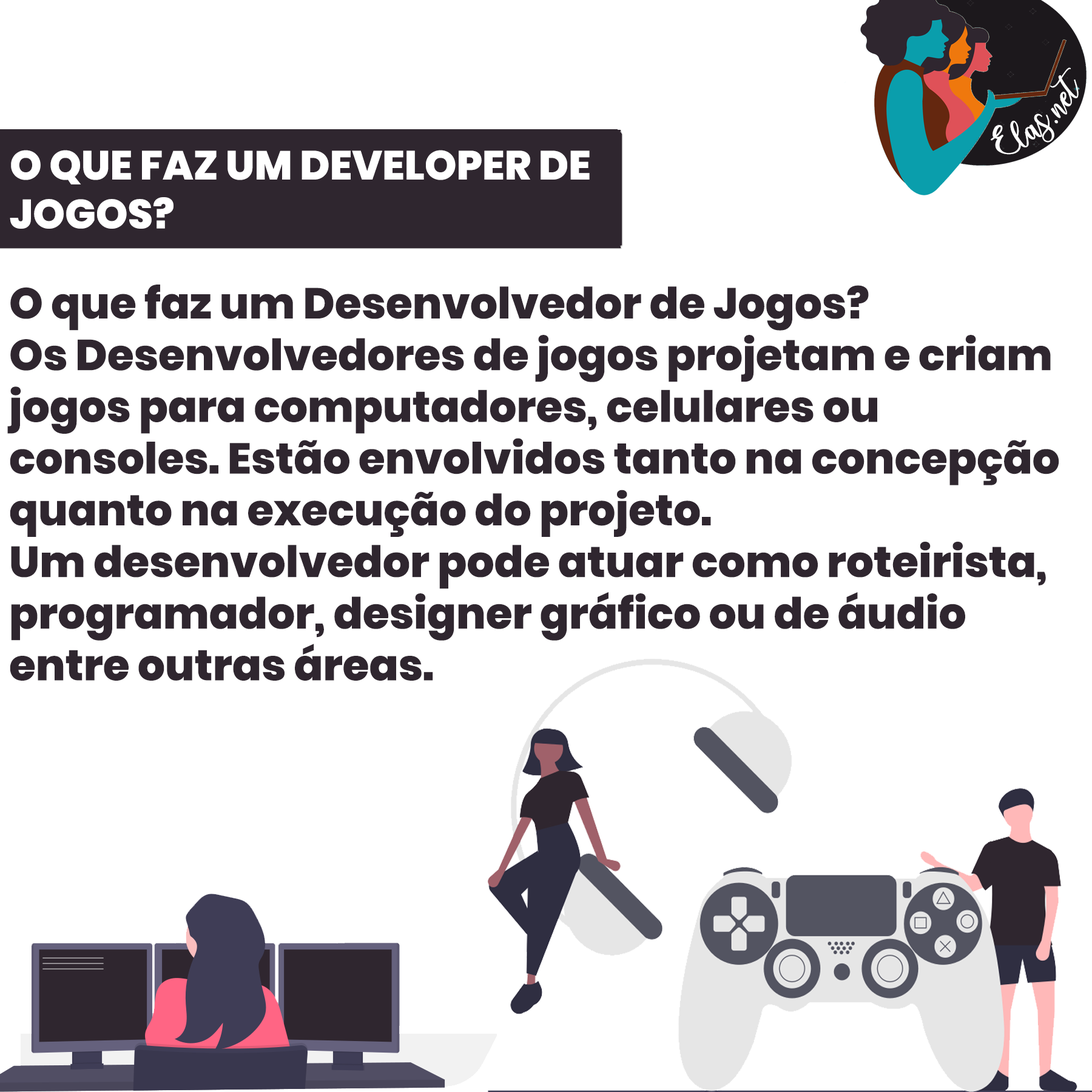
<style>
.page{position:relative;width:1092px;height:1092px;background:#ffffff}
.page>*{position:absolute;margin:0}
.t1{font:25px "charlinda-Regular";color:#ffffff;scale:1.18 1}
.t2{font:40.6px "Poppins-ExtraBold";color:#ffffff;text-transform:uppercase}
.t3{font:43.1px "Poppins-ExtraBold";color:#2f262f}
</style>
<div class="page">
<p class="t1" style="left:991px;top:67px;width:88px;height:88px;rotate:-42deg">Elas.net</p>
<p class="t2" style="left:10px;top:150px;width:580px;height:79px">O que faz um Developer de <br>jogos?</p>
<p class="t3" style="left:7px;top:285px;width:1052px;height:396px">O que faz um Desenvolvedor de Jogos? <br>Os Desenvolvedores de jogos projetam e criam <br>jogos para computadores, celulares ou <br>consoles. Estão envolvidos tanto na concepção <br>quanto na execução do projeto. <br>Um desenvolvedor pode atuar como roteirista, <br>programador, designer gráfico ou de áudio <br>entre outras áreas.</p>
</div>
